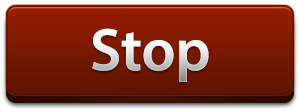
<style>
.page{position:relative;width:300px;height:110px}
.page>*{position:absolute;margin:0}
.t1{font:60px "MyriadPro-Semibold"}
</style>
<div class="page">
<p class="t1" style="left:92px;top:28px;width:117px;height:54px">Stop</p>
</div>
